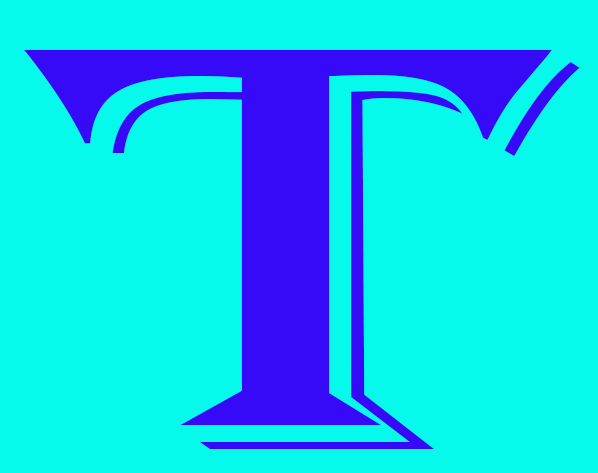
<style>
.page{position:relative;width:598px;height:473px;background:#06faec}
.page>*{position:absolute;margin:0}
.t1{font:599.4px "Algerian";color:#360af6;scale:1.5 1}
</style>
<div class="page">
<p class="t1" style="left:23px;top:49px;width:557px;height:400px">T</p>
</div>
